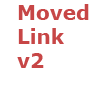
<style>
.page{position:relative;width:100px;height:100px;background:#ffffff}
.page>*{position:absolute;margin:0}
.t1{font:20px "Verdana-Bold";color:#c74646}
</style>
<div class="page">
<p class="t1" style="left:17px;top:4px;width:72px;height:64px">Moved<br>Link<br>v2</p>
</div>
